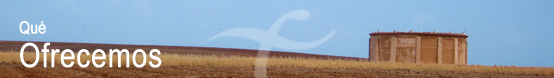
<style>
.page{position:relative;width:554px;height:78px}
.page>*{position:absolute;margin:0}
.t1{font:16.7px "ArialNarrow";color:#ffffff;font-weight:bold}
.t2{font:34px "ArialNarrow";color:#ffffff;font-weight:bold}
</style>
<div class="page">
<p class="t1" style="left:19px;top:21px;width:27px;height:14px">Qué</p>
<p class="t2" style="left:20px;top:42px;width:142px;height:26px">Ofrecemos</p>
</div>
